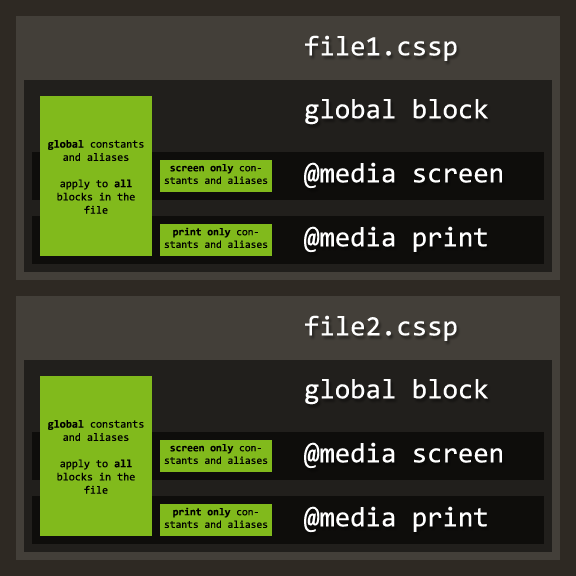
<style>
.page{position:relative;width:576px;height:576px;background:#211f1c}
.page>*{position:absolute;margin:0}
.t1{font:28px "Consolas";color:#ffffff}
.t2{font:11px "Consolas";color:#000000}
.t3{font:11px "Consolas-Bold";color:#000000}
.t4{font:10.5px "Consolas";color:#000000}
.t5{font:10.5px "Consolas-Bold";color:#000000}
</style>
<div class="page">
<p class="t1" style="left:305px;top:35px;width:152px;height:26px">file1.cssp</p>
<p class="t1" style="left:305px;top:99px;width:183px;height:26px">global block</p>
<p class="t2" style="left:48px;top:140px;width:96px;height:74px;text-align:center"><span class="t3">global </span>constants and aliases<br><br>apply to <span class="t3">all</span> blocks in the file</p>
<p class="t4" style="left:164px;top:164px;width:104px;height:20px;text-align:center"><span class="t5">screen only</span> constants and aliases</p>
<p class="t1" style="left:304px;top:162px;width:198px;height:27px">@media screen</p>
<p class="t4" style="left:164px;top:227px;width:104px;height:21px;text-align:center"><span class="t5">print only</span> constants and aliases</p>
<p class="t1" style="left:304px;top:226px;width:183px;height:27px">@media print</p>
<p class="t1" style="left:305px;top:315px;width:152px;height:26px">file2.cssp</p>
<p class="t1" style="left:305px;top:379px;width:183px;height:26px">global block</p>
<p class="t2" style="left:48px;top:420px;width:96px;height:74px;text-align:center"><span class="t3">global </span>constants and aliases<br><br>apply to <span class="t3">all</span> blocks in the file</p>
<p class="t4" style="left:164px;top:444px;width:104px;height:20px;text-align:center"><span class="t5">screen only</span> constants and aliases</p>
<p class="t1" style="left:304px;top:442px;width:198px;height:27px">@media screen</p>
<p class="t4" style="left:164px;top:507px;width:104px;height:21px;text-align:center"><span class="t5">print only</span> constants and aliases</p>
<p class="t1" style="left:304px;top:506px;width:183px;height:27px">@media print</p>
</div>
